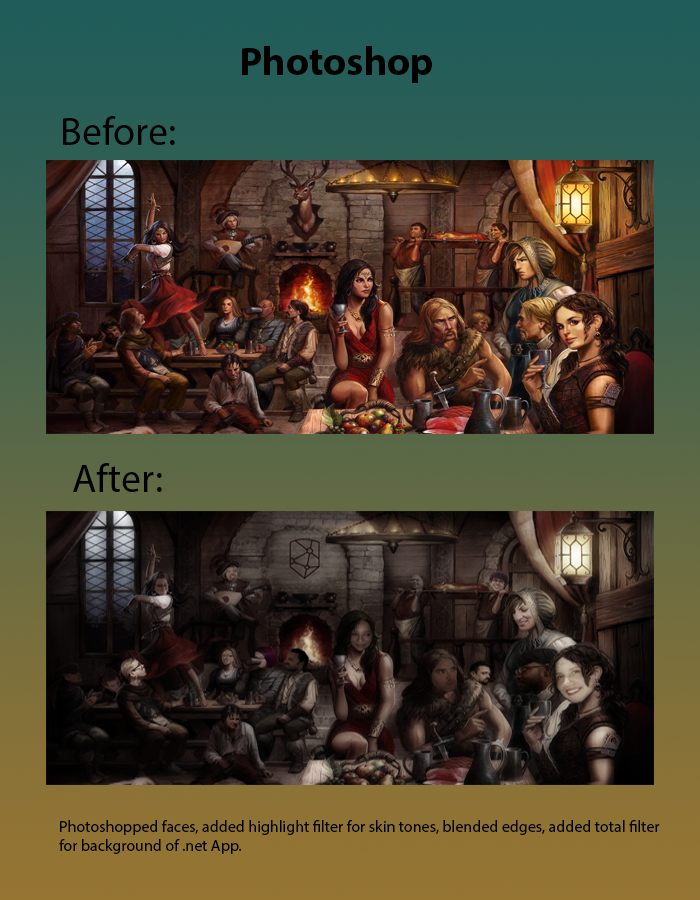
<style>
.page{position:relative;width:700px;height:900px}
.page>*{position:absolute;margin:0}
.t1{font:40px "MyriadPro-Bold";color:#000000}
.t2{font:40px "MyriadPro-Regular";color:#000000}
.t3{font:16px "MyriadPro-Regular";color:#000000}
</style>
<div class="page">
<p class="t1" style="left:242px;top:46px;width:190px;height:37px">Photoshop</p>
<p class="t2" style="left:63px;top:116px;width:112px;height:29px">Before:</p>
<p class="t2" style="left:73px;top:463px;width:89px;height:29px">After:</p>
<p class="t3" style="left:59px;top:820px;width:601px;height:34px">Photoshopped faces, added highlight filter for skin tones, blended edges, added total filter<br>for background of .net App.</p>
</div>
